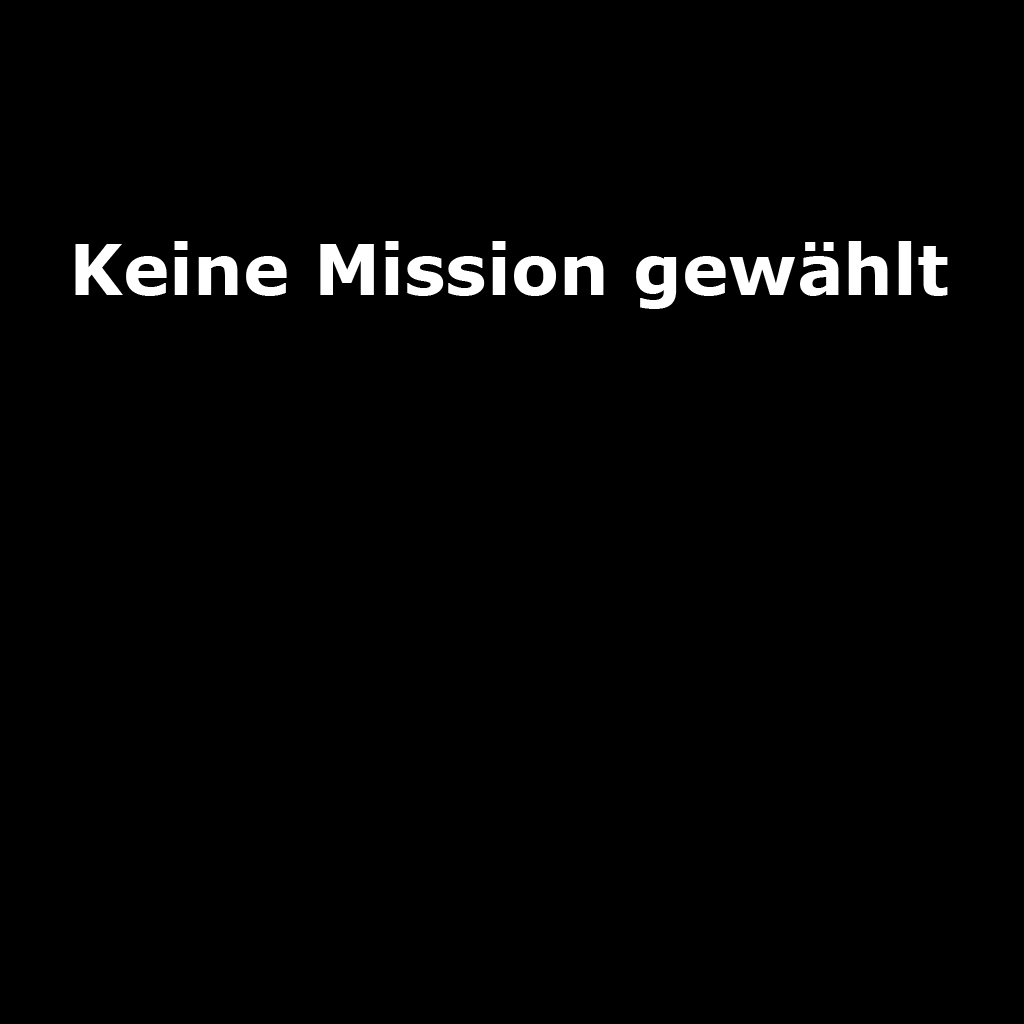
<style>
.page{position:relative;width:1024px;height:1024px;background:#000000}
.page>*{position:absolute;margin:0}
.t1{font:70px "Verdana-Bold";color:#ffffff}
</style>
<div class="page">
<p class="t1" style="left:75px;top:241px;width:873px;height:68px">Keine Mission gewählt</p>
</div>
